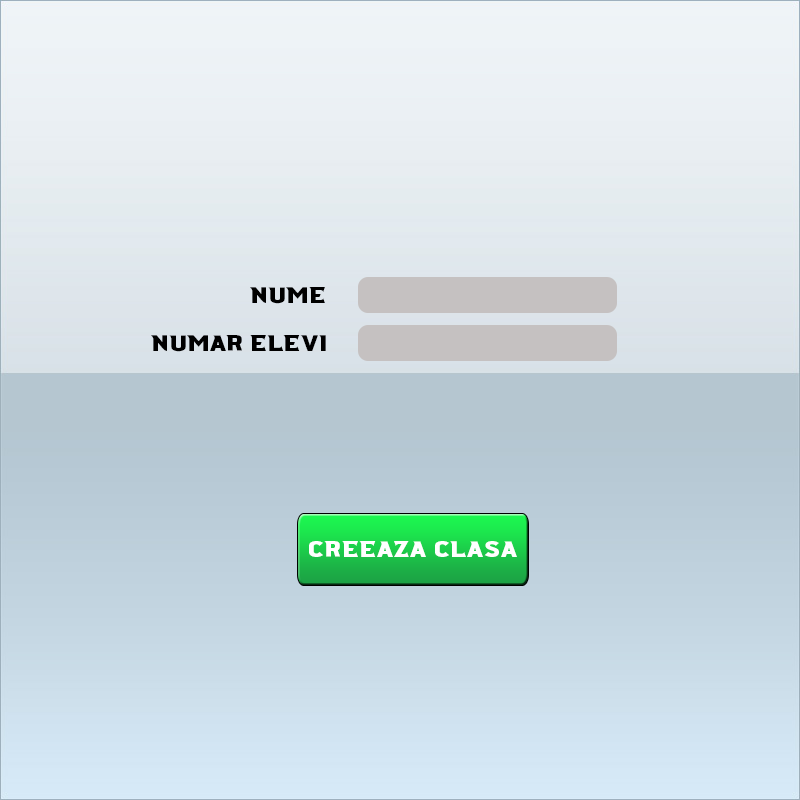
<style>
.page{position:relative;width:800px;height:800px}
.page>*{position:absolute;margin:0}
.t1{font:22.5px "Ridgeline201-Regular";color:#000000}
.t2{font:22.5px "Ridgeline201-Regular";color:#ffffff}
</style>
<div class="page">
<p class="t1" style="left:250px;top:287px;width:75px;height:17px">nume</p>
<p class="t1" style="left:151px;top:335px;width:175px;height:17px">numar elevi</p>
<p class="t2" style="left:309px;top:541px;width:208px;height:16px">creeaza clasa</p>
</div>
